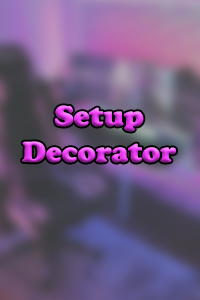
<style>
.page{position:relative;width:200px;height:300px}
.page>*{position:absolute;margin:0}
.t1{font:30px "CooperBlack"}
</style>
<div class="page">
<p class="t1" style="left:22px;top:105px;width:154px;height:58px;text-align:center">Setup<br>Decorator</p>
</div>
